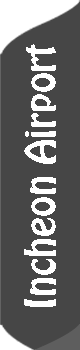
<style>
.page{position:relative;width:80px;height:350px;background:#464646}
.page>*{position:absolute;margin:0}
.t1{font:37.5px "HoboStd";color:#ffffff}
</style>
<div class="page">
<p class="t1" style="left:24px;top:44px;width:32px;height:263px;rotate:-90deg">Incheon Airport</p>
</div>
